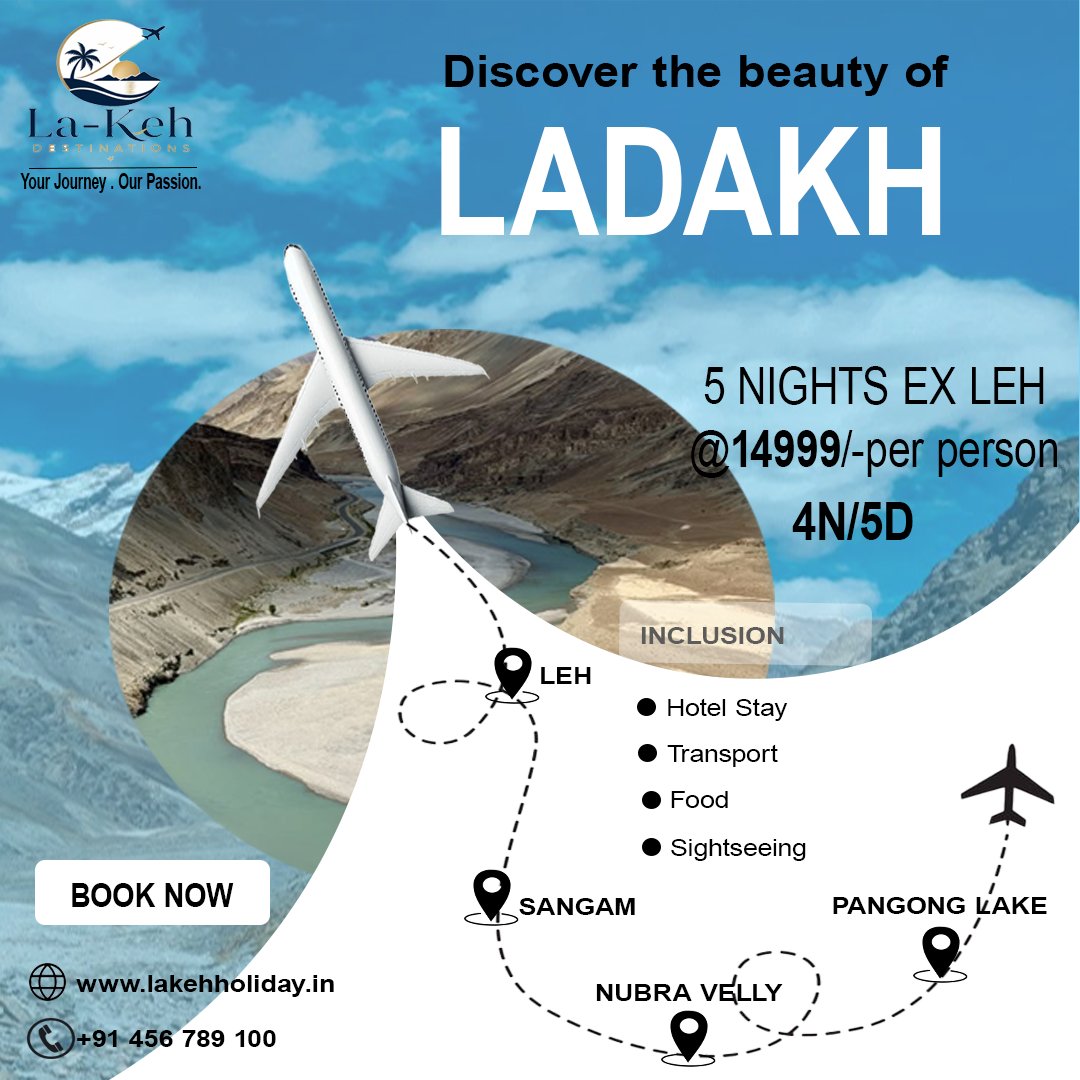
<style>
.page{position:relative;width:1080px;height:1080px;background:#ffffff}
.page>*{position:absolute;margin:0}
.t1{font:43.7px "Arial-BoldMT";letter-spacing:0.01em;color:#000000;scale:1.08 1}
.t2{font:150.6px "Arial-BoldMT";letter-spacing:0.01em;color:#ffffff;scale:0.82 1}
.t3{font:22.1px "Arial-BoldMT";letter-spacing:0.01em;color:#000000;scale:0.61 1}
.t4{font:52.5px "ArialMT";letter-spacing:0.01em;color:#000000;scale:0.78 1}
.t5{font:52.5px "Arial-BoldMT";letter-spacing:0.01em;color:#000000;scale:0.78 1}
.t6{font:53.2px "Arial-BoldMT";letter-spacing:0.01em;color:#000000;scale:0.82 1}
.t7{font:24.2px "Arial-BoldMT";letter-spacing:0.01em;color:#5c5c5c;scale:1.1 1}
.t8{font:24.2px "Arial-BoldMT";letter-spacing:0.01em;color:#000000;scale:1.1 1}
.t9{font:24.2px "ArialMT";letter-spacing:0.01em;color:#000000;scale:1.1 1}
.t10{font:33.4px "Arial-BoldMT";letter-spacing:0.01em;color:#000000;scale:0.86 1}
</style>
<div class="page">
<p class="t1" style="left:445px;top:55px;width:504px;height:41px">Discover the beauty of</p>
<p class="t2" style="left:441px;top:127px;width:500px;height:108px">LADAKH</p>
<p class="t3" style="left:20px;top:173px;width:181px;height:20px">Your Journey . Our Passion.</p>
<p class="t4" style="left:691px;top:366px;width:366px;height:112px;text-align:center">5 NIGHTS EX LEH<br>@<span class="t5">14999</span>/-per person</p>
<p class="t6" style="left:792px;top:502px;width:121px;height:38px">4N/5D</p>
<p class="t7" style="left:641px;top:627px;width:143px;height:17px">INCLUSION</p>
<p class="t8" style="left:541px;top:667px;width:50px;height:17px">LEH</p>
<p class="t9" style="left:668px;top:698px;width:120px;height:23px">Hotel Stay</p>
<p class="t9" style="left:667px;top:744px;width:111px;height:23px">Transport</p>
<p class="t9" style="left:671px;top:791px;width:57px;height:17px">Food</p>
<p class="t9" style="left:671px;top:838px;width:135px;height:23px">Sightseeing</p>
<p class="t10" style="left:72px;top:883px;width:162px;height:24px">BOOK NOW</p>
<p class="t8" style="left:519px;top:898px;width:116px;height:17px">SANGAM</p>
<p class="t8" style="left:833px;top:897px;width:214px;height:17px">PANGONG LAKE</p>
<p class="t8" style="left:76px;top:975px;width:258px;height:22px">www.lakehholiday.in</p>
<p class="t8" style="left:596px;top:984px;width:187px;height:17px">NUBRA VELLY</p>
<p class="t8" style="left:77px;top:1030px;width:199px;height:17px">+91 456 789 100</p>
</div>
